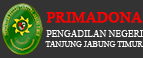
<style>
.page{position:relative;width:143px;height:58px;background:#333333}
.page>*{position:absolute;margin:0}
.t1{font:15.2px "TimesNewRomanPSMT";color:#ff0000;font-weight:bold}
.t2{font:9.3px "TimesNewRomanPSMT";color:#ffffff}
.t3{font:8px "TimesNewRomanPSMT";color:#ffffff}
</style>
<div class="page">
<p class="t1" style="left:46px;top:12px;width:97px;height:11px">PRIMADONA</p>
<p class="t2" style="left:46px;top:30px;width:97px;height:7px">PENGADILAN NEGERI</p>
<p class="t3" style="left:45px;top:41px;width:99px;height:6px">TANJUNG JABUNG TIMUR</p>
</div>
